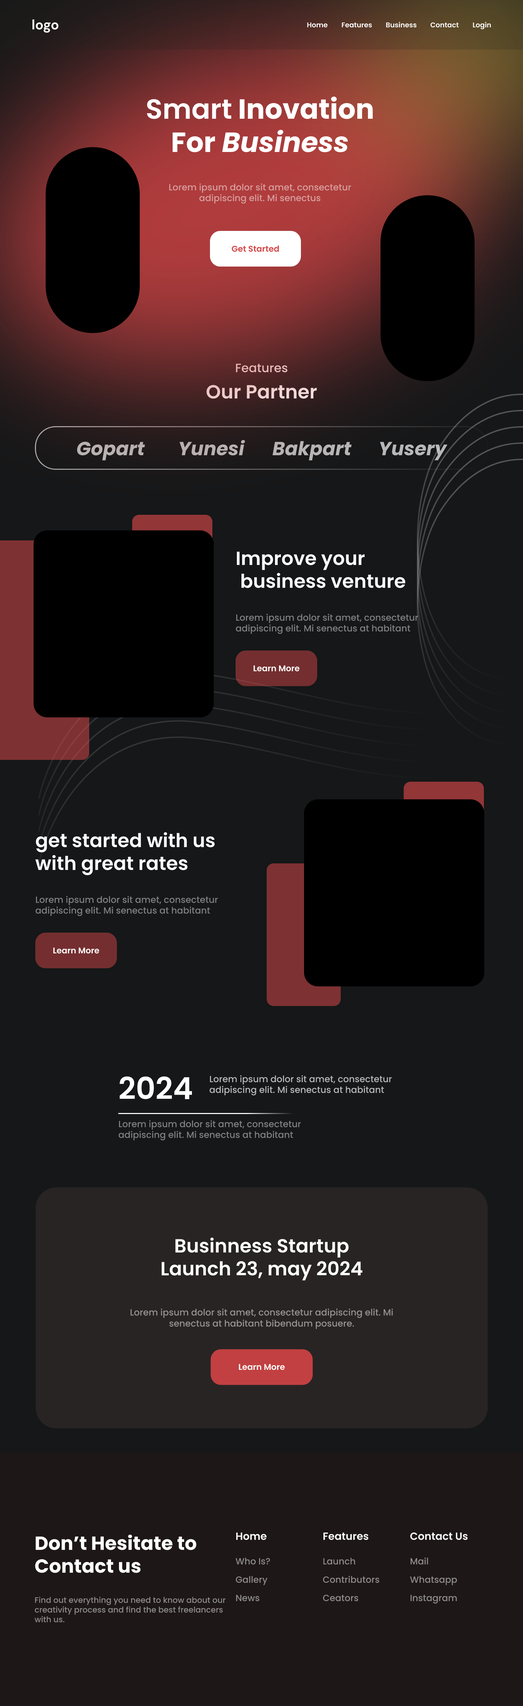
<style>
.page{position:relative;width:523px;height:1706px;background:#151718}
.page>*{position:absolute;margin:0}
.t1{font:13.8px "DMSans-Bold";color:#ffffff}
.t2{font:6.9px "Poppins-SemiBold";color:#ffffff}
.t3{font:27.7px "Poppins-Bold";color:#ffffff}
.t4{font:27.7px "Poppins-SemiBold";color:#ffffff}
.t5{font:27.7px "Poppins-BoldItalic";color:#ffffff}
.t6{font:9px "Poppins-Medium";color:#d89e9e}
.t7{font:8.3px "Poppins-SemiBold";color:#d6494b}
.t8{font:12.1px "Poppins-Medium";color:#e8b8b8}
.t9{font:19px "Poppins-SemiBold";color:#f0d0d0}
.t10{font:19px "Poppins-BoldItalic";color:#b9b1b2}
.t11{font:19px "Poppins-BoldItalic";color:#b9b0b1}
.t12{font:19px "Poppins-BoldItalic";color:#b8b4b5}
.t13{font:19px "Poppins-BoldItalic";color:#b8b8b9}
.t14{font:19px "Poppins-SemiBold";color:#ffffff}
.t15{font:9px "Poppins-Medium";color:#7f8080}
.t16{font:8.3px "Poppins-SemiBold";color:#ffffff}
.t17{font:30.5px "Poppins-SemiBold";color:#ffffff}
.t18{font:9px "Poppins-Medium";color:#b8b9b9}
.t19{font:9px "Poppins-Medium";color:#949292}
.t20{font:19px "Poppins-Bold";color:#ffffff}
.t21{font:10.4px "Poppins-SemiBold";color:#ffffff}
.t22{font:9px "Poppins-Medium";color:#8e8b8c}
.t23{font:8px "Poppins-Medium";color:#8e8b8c}
</style>
<div class="page">
<p class="t1" style="left:32px;top:19px;width:26px;height:14px">logo</p>
<p class="t2" style="left:307px;top:22px;width:21px;height:6px">Home</p>
<p class="t2" style="left:342px;top:22px;width:30px;height:6px">Features</p>
<p class="t2" style="left:386px;top:22px;width:31px;height:6px">Business</p>
<p class="t2" style="left:431px;top:22px;width:28px;height:6px">Contact</p>
<p class="t2" style="left:473px;top:22px;width:18px;height:7px">Login</p>
<p class="t3" style="left:147px;top:96px;width:226px;height:56px;text-align:center"><span class="t4">Smart</span> Inovation <br>For<span class="t5"> Business</span></p>
<p class="t6" style="left:169px;top:183px;width:182px;height:21px;text-align:center">Lorem ipsum dolor sit amet, consectetur adipiscing elit. Mi senectus</p>
<p class="t7" style="left:232px;top:245px;width:47px;height:7px">Get Started</p>
<p class="t8" style="left:236px;top:363px;width:52px;height:9px">Features</p>
<p class="t9" style="left:207px;top:385px;width:110px;height:14px">Our Partner</p>
<p class="t10" style="left:76px;top:441px;width:69px;height:19px">Gopart</p>
<p class="t11" style="left:179px;top:440px;width:66px;height:16px">Yunesi</p>
<p class="t12" style="left:273px;top:441px;width:79px;height:19px">Bakpart</p>
<p class="t13" style="left:380px;top:442px;width:68px;height:18px">Yusery</p>
<p class="t14" style="left:237px;top:551px;width:169px;height:37px">Improve your<br> business venture</p>
<p class="t15" style="left:236px;top:613px;width:182px;height:21px">Lorem ipsum dolor sit amet, consectetur adipiscing elit. Mi senectus at habitant</p>
<p class="t16" style="left:254px;top:665px;width:46px;height:7px">Learn More</p>
<p class="t14" style="left:35px;top:832px;width:180px;height:43px">get started with us with great rates</p>
<p class="t15" style="left:35px;top:896px;width:183px;height:20px">Lorem ipsum dolor sit amet, consectetur adipiscing elit. Mi senectus at habitant</p>
<p class="t16" style="left:53px;top:947px;width:46px;height:7px">Learn More</p>
<p class="t17" style="left:119px;top:1076px;width:73px;height:23px">2024</p>
<p class="t18" style="left:209px;top:1075px;width:183px;height:21px">Lorem ipsum dolor sit amet, consectetur adipiscing elit. Mi senectus at habitant</p>
<p class="t15" style="left:118px;top:1120px;width:183px;height:21px">Lorem ipsum dolor sit amet, consectetur adipiscing elit. Mi senectus at habitant</p>
<p class="t14" style="left:162px;top:1237px;width:201px;height:43px;text-align:center">Businness Startup<br>Launch 23, may 2024</p>
<p class="t19" style="left:130px;top:1308px;width:263px;height:21px;text-align:center">Lorem ipsum dolor sit amet, consectetur adipiscing elit. Mi senectus at habitant bibendum posuere.</p>
<p class="t16" style="left:239px;top:1364px;width:46px;height:6px">Learn More</p>
<p class="t20" style="left:35px;top:1534px;width:162px;height:39px">Don’t Hesitate to<br>Contact us</p>
<p class="t21" style="left:236px;top:1532px;width:31px;height:8px">Home</p>
<p class="t21" style="left:324px;top:1532px;width:45px;height:8px">Features</p>
<p class="t21" style="left:411px;top:1532px;width:57px;height:8px">Contact Us</p>
<p class="t22" style="left:236px;top:1557px;width:34px;height:8px">Who Is?</p>
<p class="t22" style="left:323px;top:1557px;width:33px;height:8px">Launch</p>
<p class="t22" style="left:411px;top:1557px;width:18px;height:8px">Mail</p>
<p class="t22" style="left:236px;top:1576px;width:32px;height:9px">Gallery</p>
<p class="t22" style="left:323px;top:1575px;width:57px;height:8px">Contributors</p>
<p class="t22" style="left:410px;top:1576px;width:47px;height:9px">Whatsapp</p>
<p class="t23" style="left:35px;top:1596px;width:191px;height:26px">Find out everything you need to know about our creativity process and find the best freelancers with us.</p>
<p class="t22" style="left:236px;top:1594px;width:24px;height:7px">News</p>
<p class="t22" style="left:323px;top:1594px;width:36px;height:7px">Ceators</p>
<p class="t22" style="left:411px;top:1594px;width:46px;height:10px">Instagram</p>
</div>
